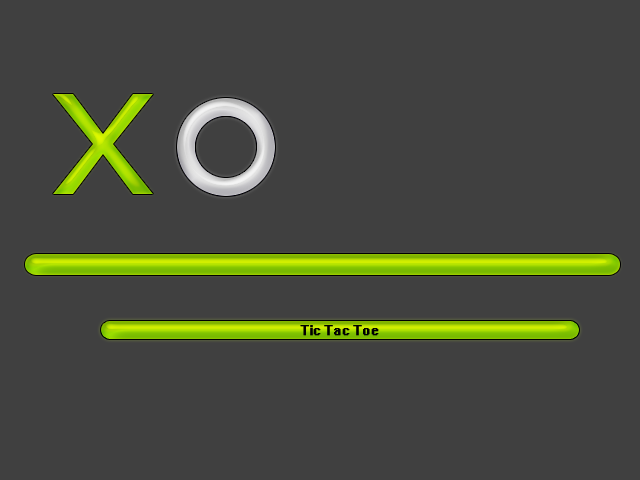
<style>
.page{position:relative;width:640px;height:480px;background:#404040}
.page>*{position:absolute;margin:0}
.t1{font:14px "System";color:#000000;font-weight:bold}
</style>
<div class="page">
<p class="t1" style="left:300px;top:325px;width:79px;height:11px">Tic Tac Toe</p>
</div>
